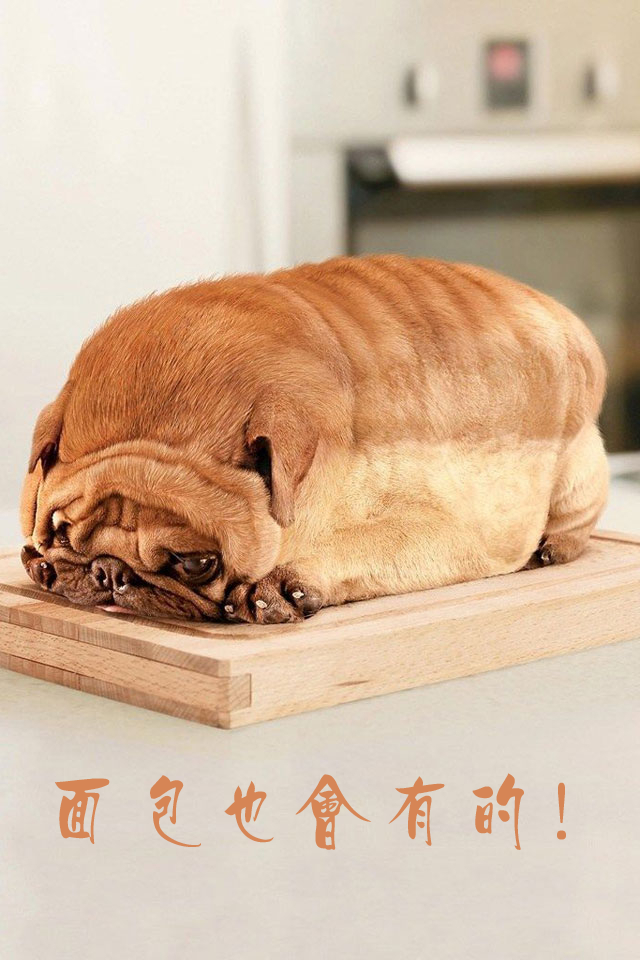
<style>
.page{position:relative;width:640px;height:960px}
.page>*{position:absolute;margin:0}
.t1{font:83.3px "¾­µä·±ÖÐ±ä Regular";color:#d68555}
</style>
<div class="page">
<p class="t1" style="left:55px;top:773px;width:511px;height:77px">面包也会有的!</p>
</div>
